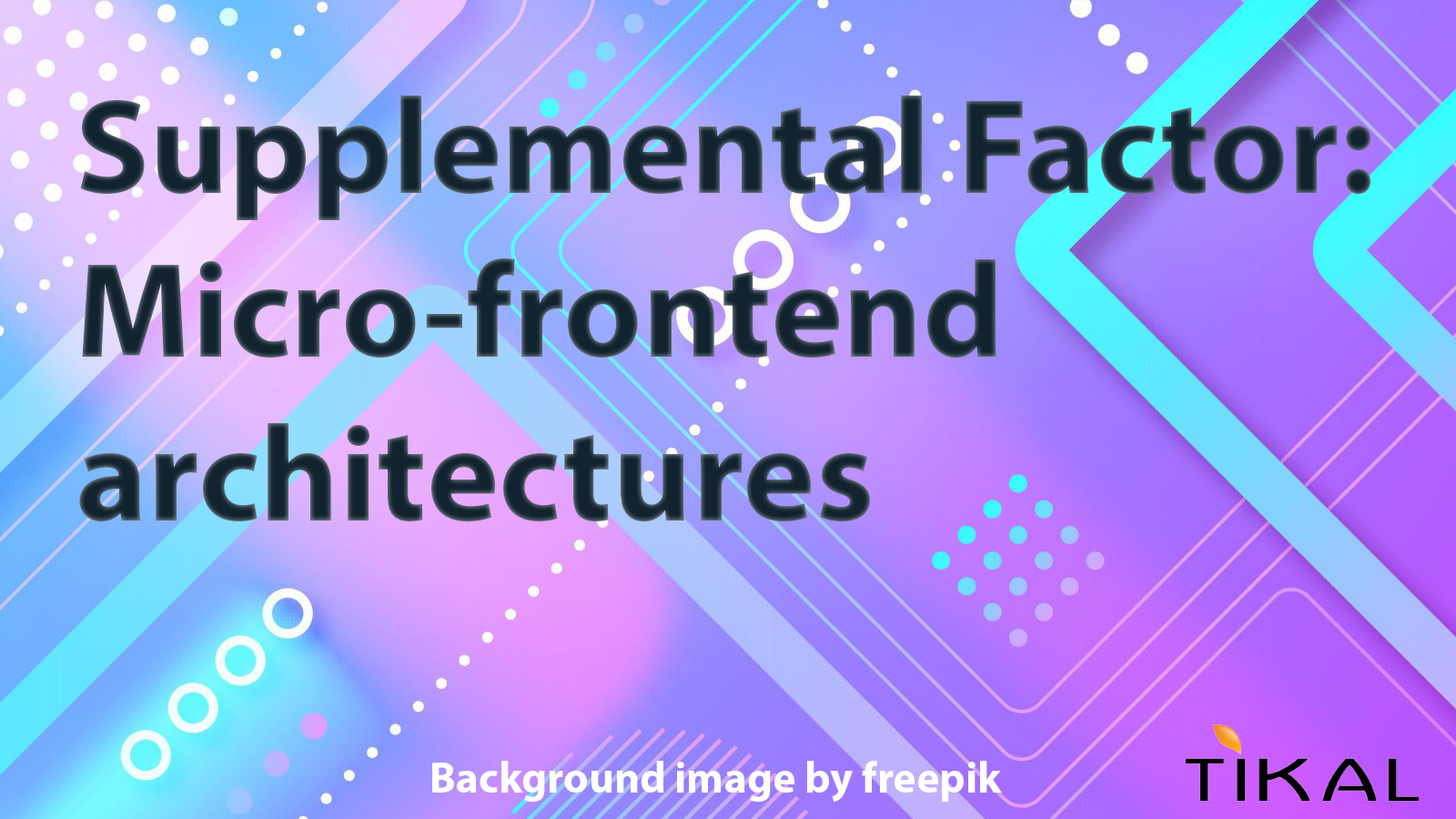
<style>
.page{position:relative;width:1456px;height:819px}
.page>*{position:absolute;margin:0}
.t1{font:136.5px "MyriadPro-Bold";color:#11232f}
.t2{font:43.7px "MyriadPro-Bold";color:#ffffff}
</style>
<div class="page">
<p class="t1" style="left:79px;top:96px;width:1291px;height:426px">Supplemental Factor: <br>Micro-frontend architectures</p>
<p class="t2" style="left:432px;top:761px;width:570px;height:41px">Background image by freepik</p>
</div>
